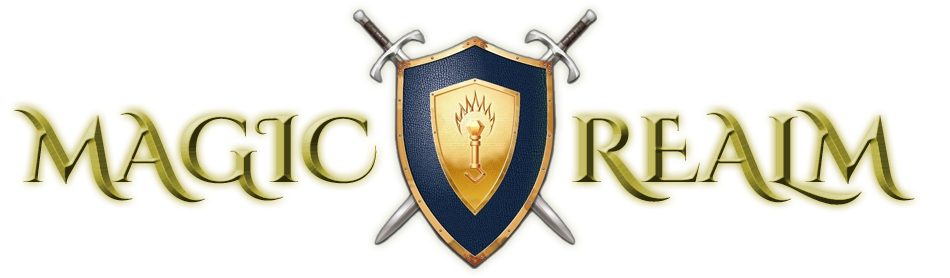
<style>
.page{position:relative;width:950px;height:278px;background:#ffffff}
.page>*{position:absolute;margin:0}
.t1{font:94px "CinzelDecorative-Bold"}
</style>
<div class="page">
<p class="t1" style="left:14px;top:107px;width:363px;height:96px">MAGIC</p>
<p class="t1" style="left:572px;top:107px;width:343px;height:98px">REALM</p>
</div>
